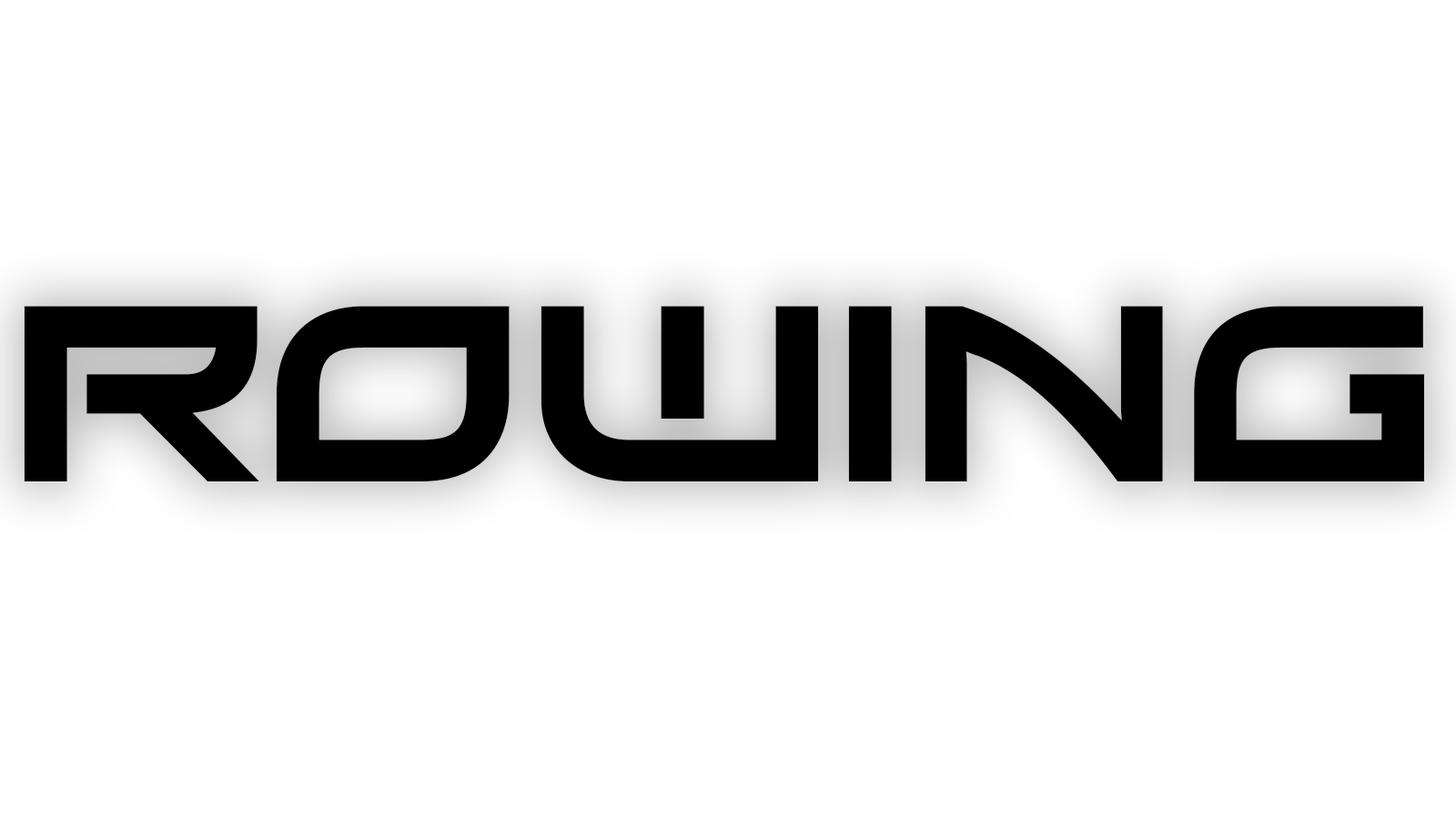
<style>
.page{position:relative;width:1456px;height:819px;background:#ffffff}
.page>*{position:absolute;margin:0}
.t1{font:250.2px "Xirod-Regular";color:#000000}
</style>
<div class="page">
<p class="t1" style="left:24px;top:306px;width:1400px;height:175px">Rowing</p>
</div>
